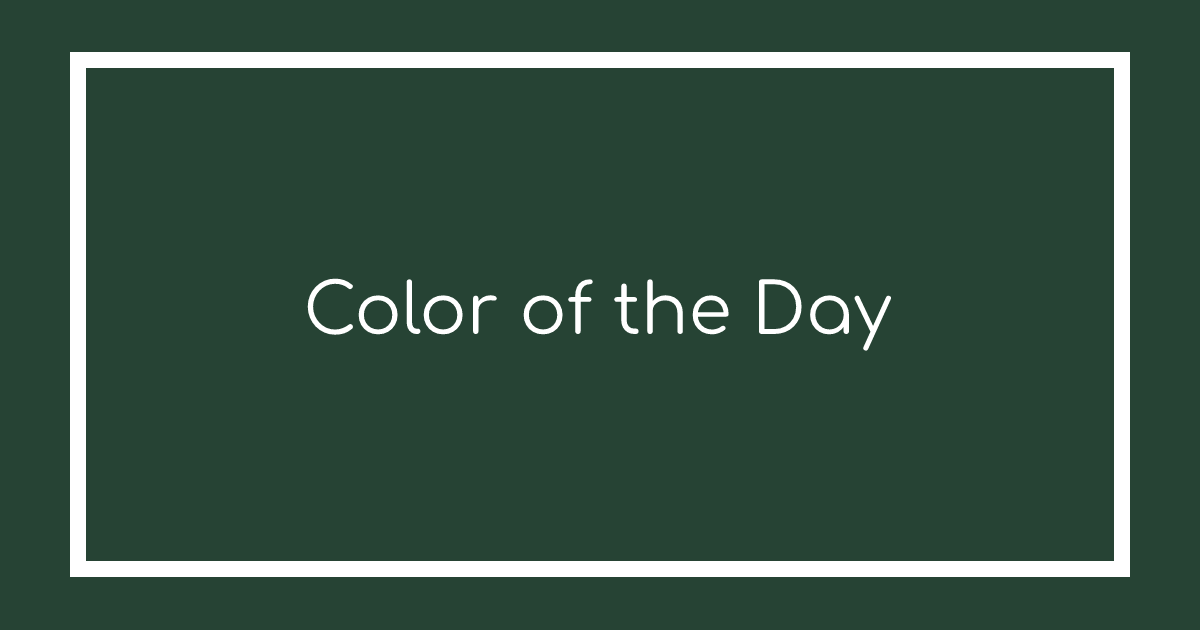
<style>
.page{position:relative;width:1200px;height:630px;background:#264334}
.page>*{position:absolute;margin:0}
.t1{font:70px "Comfortaa-Regular";color:#ffffff}
</style>
<div class="page">
<p class="t1" style="left:307px;top:278px;width:585px;height:73px">Color of the Day</p>
</div>
